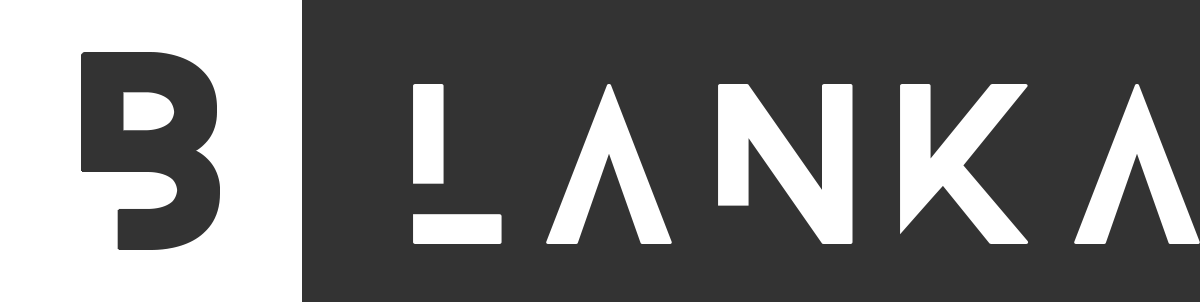
<style>
.page{position:relative;width:1200px;height:302px;background:#333333}
.page>*{position:absolute;margin:0}
.t1{font:200px "Blanka-Regular";letter-spacing:0.2em;color:#ffffff;text-transform:uppercase}
</style>
<div class="page">
<p class="t1" style="left:413px;top:84px;width:787px;height:160px">Lanka</p>
</div>
